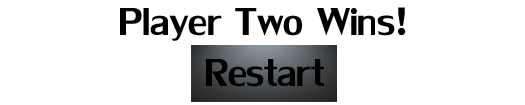
<style>
.page{position:relative;width:525px;height:105px;background:#ffffff}
.page>*{position:absolute;margin:0}
.t1{font:58.1px "LilyUPC";color:#000000}
</style>
<div class="page">
<p class="t1" style="left:120px;top:7px;width:286px;height:34px">Player Two Wins!</p>
</div>
